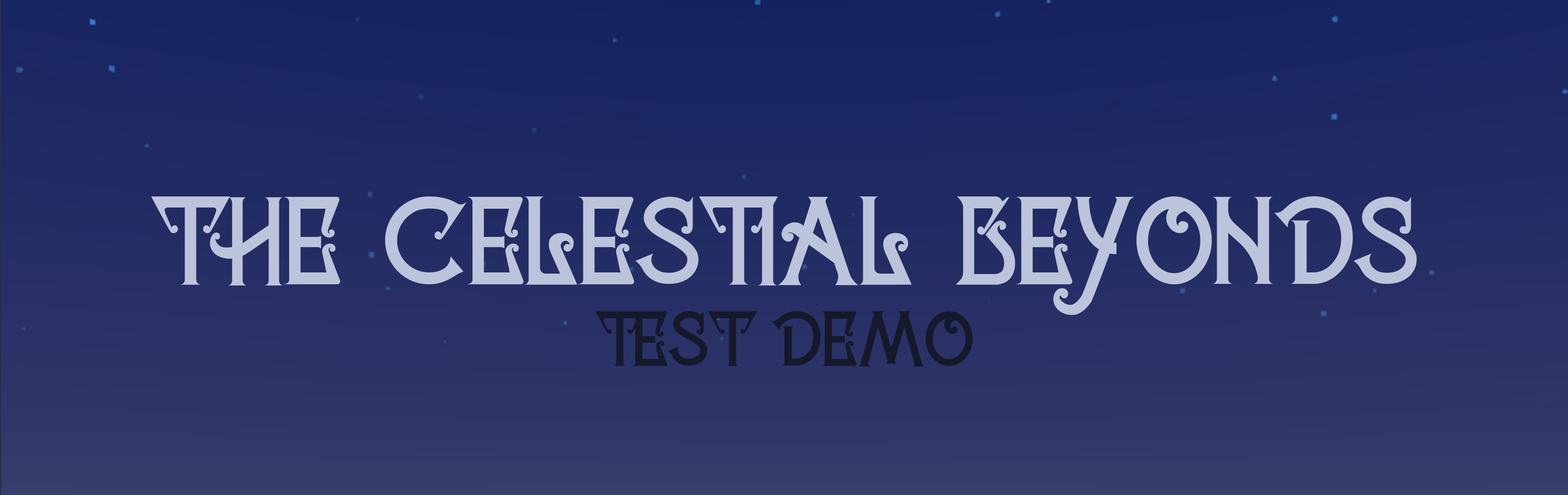
<style>
.page{position:relative;width:1568px;height:495px}
.page>*{position:absolute;margin:0}
.t1{font:87.1px "Celestial-Typeface";color:#bbc4db}
.t2{font:54.5px "Celestial-Typeface";color:#16192b}
</style>
<div class="page">
<p class="t1" style="left:151px;top:196px;width:1266px;height:119px">THE CELESTIAL BEYONDS</p>
<p class="t2" style="left:595px;top:311px;width:378px;height:55px">TEST DEMO</p>
</div>
